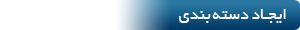
<style>
.page{position:relative;width:300px;height:30px;background:#ffffff}
.page>*{position:absolute;margin:0}
.t1{font:17.4px "BYekan";color:#ffffff}
</style>
<div class="page">
<p class="t1" style="left:179px;top:9px;width:107px;height:14px">ایجـاد دسته بندی</p>
</div>
